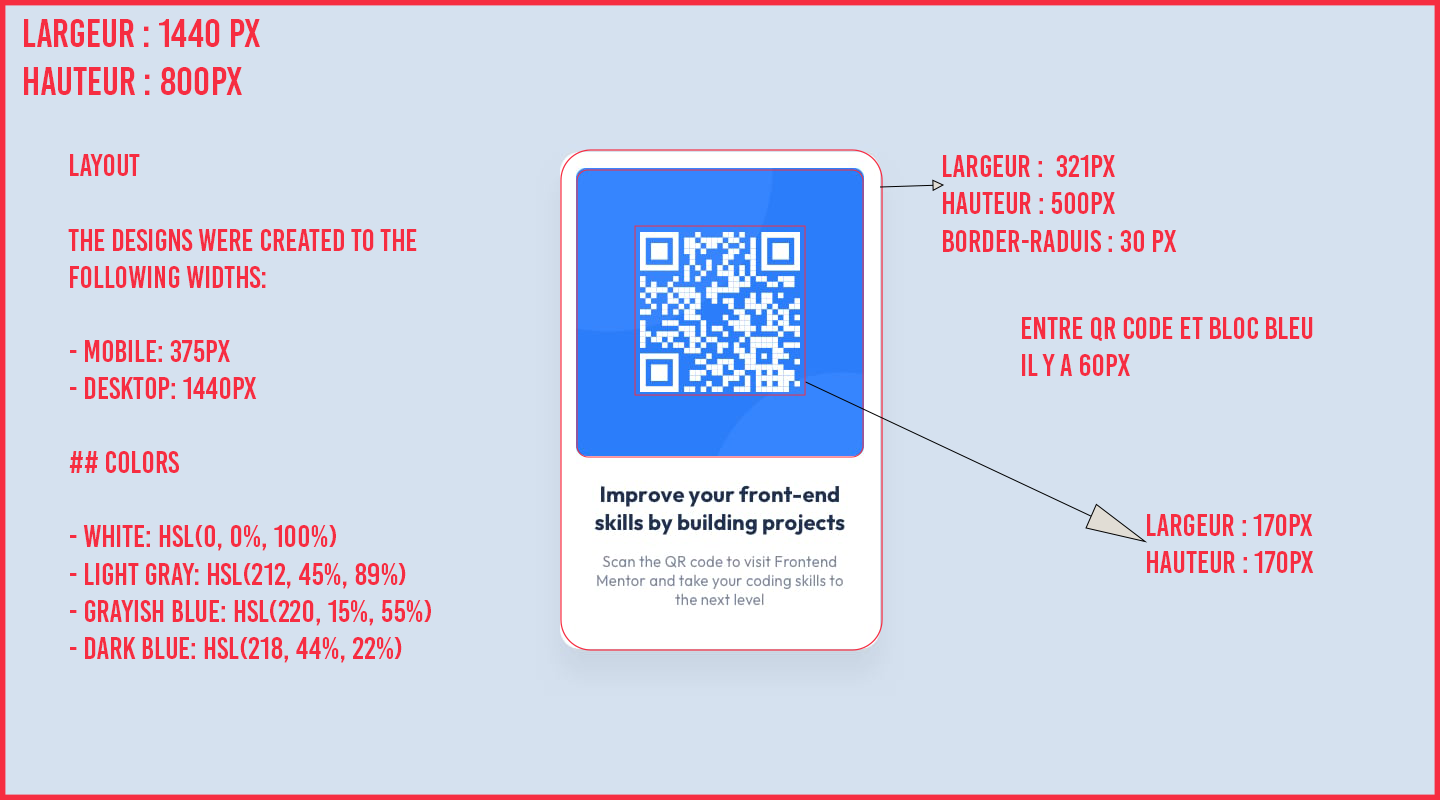
<style>
.page{position:relative;width:1440px;height:800px;background:#d5e1ef}
.page>*{position:absolute;margin:0}
.t1{font:39.7px "BebasKai";color:#f62d41}
.t2{font:30.9px "BebasKai";color:#f62d41}
.t3{font:31.3px "BebasKai";color:#f62d41}
</style>
<div class="page">
<p class="t1" style="left:24px;top:19px;width:236px;height:76px">Largeur : 1440 px<br>hauteur : 800px</p>
<p class="t2" style="left:68px;top:154px;width:363px;height:509px">Layout<br><br>The designs were created to the following widths:<br><br>- Mobile: 375px<br>- Desktop: 1440px<br><br>## Colors<br><br>- White: hsl(0, 0%, 100%)<br>- Light gray: hsl(212, 45%, 89%)<br>- Grayish blue: hsl(220, 15%, 55%)<br>- Dark blue: hsl(218, 44%, 22%)<br><br>## Typography<br><br>### Body Copy<br><br>- Font size (paragraph): 15px<br><br>### Font<br><br>- Family: [Outfit](https://fonts.google.com/specimen/Outfit)<br>- Weights: 400, 700</p>
<p class="t3" style="left:943px;top:155px;width:234px;height:97px">Largeur :  321px <br>Hauteur : 500px<br>border-raduis : 30 px</p>
<p class="t3" style="left:1022px;top:317px;width:291px;height:59px">entre qr code et bloc bleu<br>il y a 60px</p>
<p class="t3" style="left:1147px;top:514px;width:167px;height:59px">largeur : 170px<br>hauteur : 170px</p>
</div>
